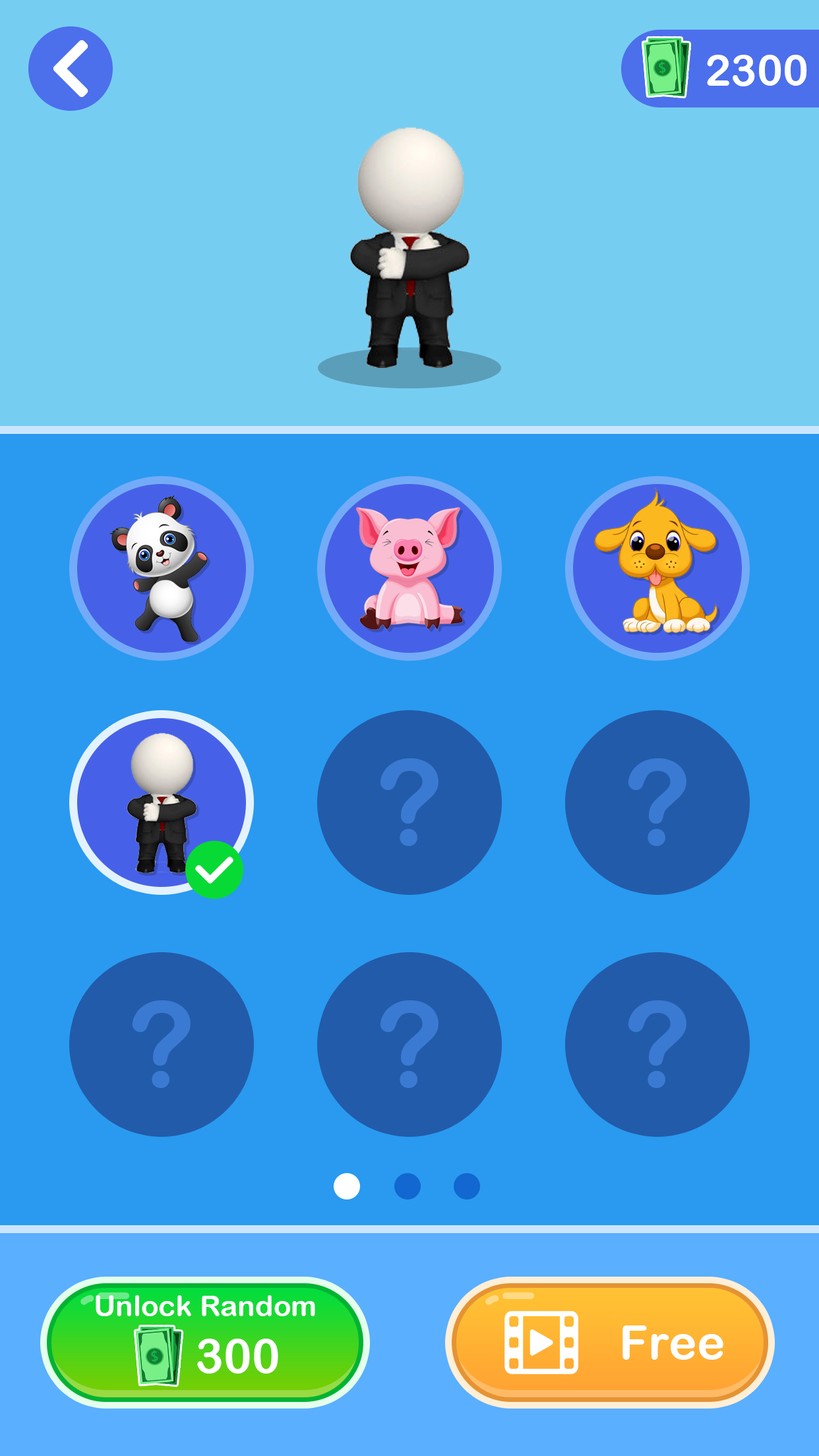
<style>
.page{position:relative;width:819px;height:1456px;background:#299af0}
.page>*{position:absolute;margin:0}
.t1{font:43.5px "ArialRoundedMTBold";color:#ffffff}
.t2{font:118.7px "ArialRoundedMTBold";color:#3a7ad2}
.t3{font:29px "ArialRoundedMTBold";color:#ffffff}
.t4{font:47.5px "ArialRoundedMTBold";color:#ffffff}
</style>
<div class="page">
<p class="t1" style="left:707px;top:55px;width:100px;height:31px">2300</p>
<p class="t2" style="left:380px;top:758px;width:59px;height:88px">?</p>
<p class="t2" style="left:628px;top:758px;width:58px;height:88px">?</p>
<p class="t2" style="left:132px;top:1000px;width:59px;height:88px">?</p>
<p class="t2" style="left:380px;top:1000px;width:59px;height:88px">?</p>
<p class="t2" style="left:628px;top:1000px;width:58px;height:88px">?</p>
<p class="t3" style="left:96px;top:1295px;width:219px;height:21px">Unlock Random</p>
<p class="t4" style="left:622px;top:1325px;width:101px;height:35px">Free</p>
<p class="t4" style="left:197px;top:1339px;width:81px;height:35px">300</p>
</div>
